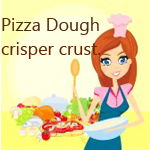
<style>
.page{position:relative;width:150px;height:150px}
.page>*{position:absolute;margin:0}
.t1{font:18px "SegoeUISymbol";color:#552c18}
.t2{font:18px "SegoeUISymbol";color:#672303}
</style>
<div class="page">
<p class="t1" style="left:2px;top:17px;width:97px;height:18px">Pizza Dough</p>
<p class="t2" style="left:1px;top:42px;width:100px;height:17px">crisper crust.</p>
</div>
